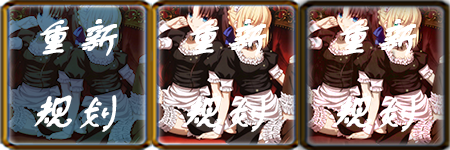
<style>
.page{position:relative;width:450px;height:150px}
.page>*{position:absolute;margin:0}
.t1{font:43.1px "FZSTK--GBK1-0";color:#ffffff;text-transform:uppercase;font-weight:bold;font-style:italic}
</style>
<div class="page">
<p class="t1" style="left:34px;top:19px;width:84px;height:113px">重新<br>规划</p>
<p class="t1" style="left:184px;top:19px;width:83px;height:113px">重新<br>规划</p>
<p class="t1" style="left:334px;top:19px;width:83px;height:113px">重新<br>规划</p>
</div>
